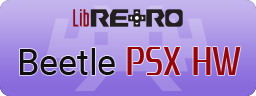
<style>
.page{position:relative;width:256px;height:96px}
.page>*{position:absolute;margin:0}
.t1{font:36px "Roboto-Regular";color:#100e0e}
.t2{font:48px "Zrnic";color:#970607}
</style>
<div class="page">
<p class="t1" style="left:20px;top:48px;width:95px;height:27px">Beetle</p>
<p class="t2" style="left:127px;top:47px;width:114px;height:28px">PSX HW</p>
</div>
